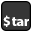
<style>
.page{position:relative;width:32px;height:32px;background:#363636}
.page>*{position:absolute;margin:0}
.t1{font:14px "MyriadPro-Bold";color:#ffffff}
</style>
<div class="page">
<p class="t1" style="left:3px;top:15px;width:26px;height:12px">$ tar</p>
</div>
